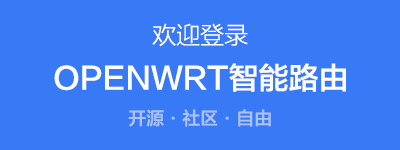
<style>
.page{position:relative;width:400px;height:150px;background:#3879f6}
.page>*{position:absolute;margin:0}
.t1{font:24px "FZLTXHK--GBK1-0";color:#fdfdfd}
.t2{font:30px "FZLTZHK--GBK1-0";color:#fdfdfd}
.t3{font:18px "FZLTZHK--GBK1-0";color:#adc2fa}
</style>
<div class="page">
<p class="t1" style="left:152px;top:23px;width:96px;height:24px">欢迎登录</p>
<p class="t2" style="left:54px;top:63px;width:292px;height:29px">OPENWRT智能路由</p>
<p class="t3" style="left:128px;top:109px;width:143px;height:18px">开源·社区·自由</p>
</div>
